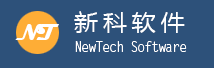
<style>
.page{position:relative;width:214px;height:68px;background:#2d517a}
.page>*{position:absolute;margin:0}
.t1{font:21.6px "MicrosoftYaHei";letter-spacing:0.2em;color:#ffffff;scale:1.11 1}
.t2{font:24px "Magneto-Bold";letter-spacing:-0.1em;color:#ffffff}
.t3{font:14px "LetterGothicStd";letter-spacing:-0.1em;color:#ffffff}
</style>
<div class="page">
<p class="t1" style="left:74px;top:11px;width:111px;height:22px">新科软件</p>
<p class="t2" style="left:15px;top:24px;width:44px;height:16px">NT</p>
<p class="t3" style="left:75px;top:41px;width:112px;height:11px">NewTech Software</p>
</div>
